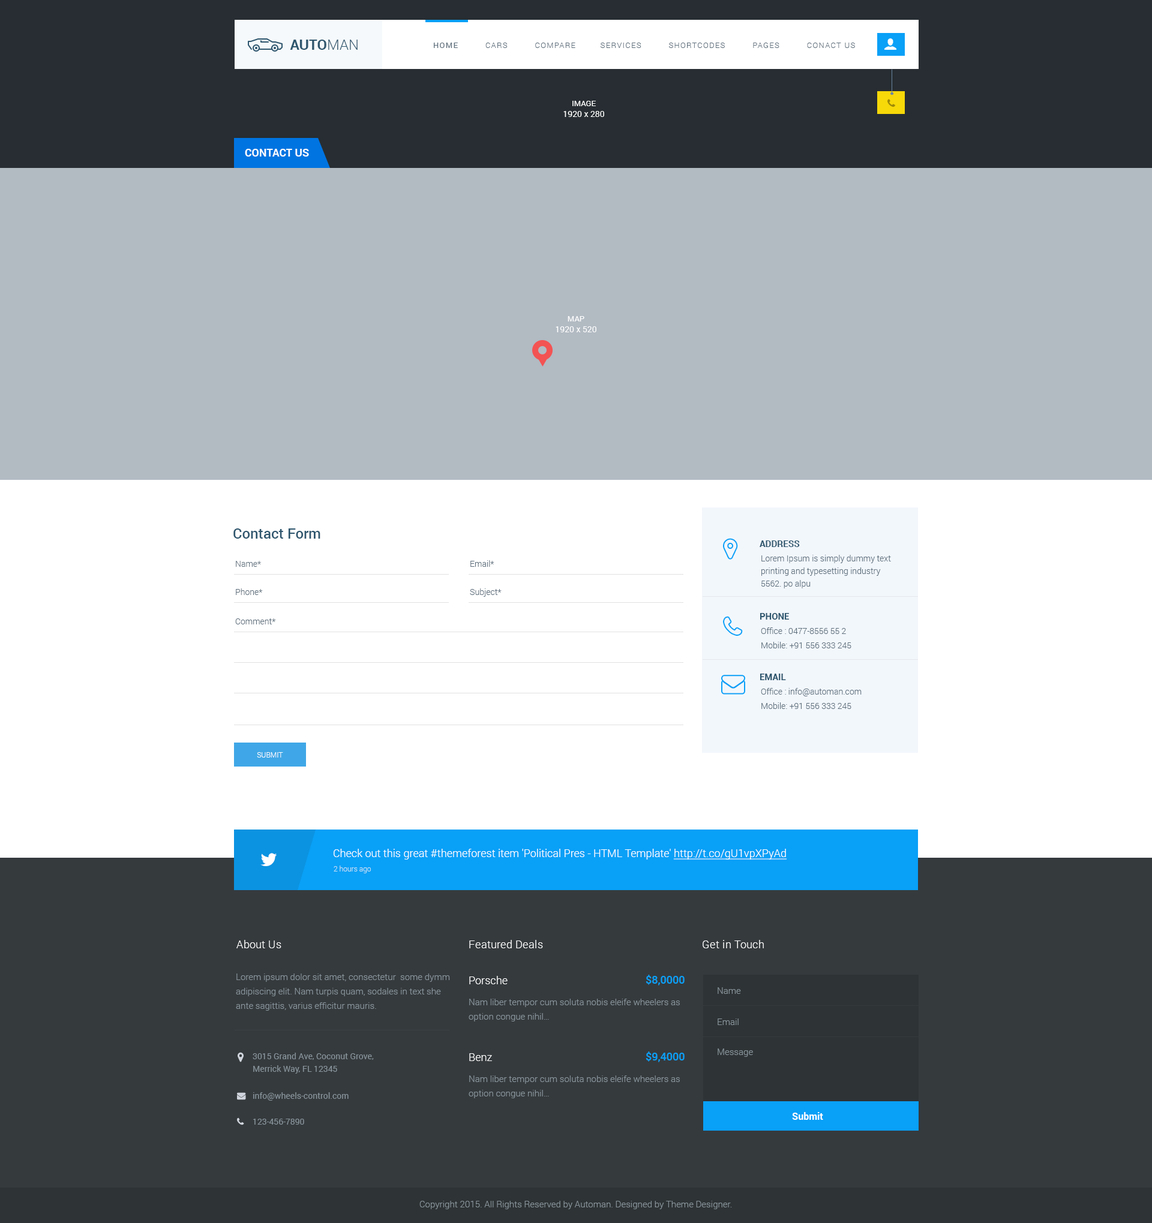
<style>
.page{position:relative;width:1152px;height:1223px;background:#ffffff}
.page>*{position:absolute;margin:0}
.t1{font:14.4px "Roboto-Bold";color:#2e566e;text-transform:uppercase}
.t2{font:14.4px "Roboto-Light";color:#2e566e;text-transform:uppercase}
.t3{font:7.8px "Roboto-Light";letter-spacing:0.1em;color:#5d6e7b;text-transform:uppercase}
.t4{font:7.8px "Roboto-Regular";letter-spacing:0.1em;color:#5d6e7b;text-transform:uppercase}
.t5{font:8.4px/10.8px "Roboto-Regular";color:#ffffff}
.t6{font:7.8px/10.8px "Roboto-Regular";color:#ffffff}
.t7{font:10.8px "Roboto-Bold";color:#ffffff;text-transform:uppercase}
.t8{font:14.4px "Roboto-Medium";color:#2e566e}
.t9{font:9px "Roboto-Bold";color:#2e566e;text-transform:uppercase}
.t10{font:8.4px/12.6px "Roboto-Light";color:#5d6e7b}
.t11{font:8.4px "Roboto-Light";color:#5d6e7b}
.t12{font:8.4px/14.4px "Roboto-Light";color:#5d6e7b}
.t13{font:7.2px "Roboto-Light";color:#ffffff;text-transform:uppercase}
.t14{font:10.8px "Roboto-Light";color:#ffffff}
.t15{font:10.8px "Roboto-Light";color:#ffffff;text-decoration:underline}
.t16{font:7.2px "Roboto-Light";color:#c3e1f4}
.t17{font:10.8px "Roboto-Light";letter-spacing:0.025em;color:#ffffff}
.t18{font:9px/14.4px "Roboto-Light";color:#88949b}
.t19{font:10.8px "Roboto-Medium";color:#09a0f7}
.t20{font:9px "Roboto-Light";color:#88949b}
.t21{font:8.4px/12.6px "Roboto-Regular";color:#88949b}
.t22{font:8.4px "Roboto-Regular";color:#88949b}
.t23{font:9.6px "Roboto-Bold";color:#ffffff}
</style>
<div class="page">
<p class="t1" style="left:290px;top:40px;width:68px;height:10px">Auto<span class="t2">man</span></p>
<p class="t3" style="left:434px;top:43px;width:421px;height:5px"><span class="t4">Home</span>          Cars          COMPARE         Services          Shortcodes          Pages          Conact us</p>
<p class="t5" style="left:563px;top:101px;width:41px;height:16px;text-align:center"><span class="t6">IMAGE<br></span>1920 x 280</p>
<p class="t7" style="left:245px;top:149px;width:64px;height:8px">Contact Us</p>
<p class="t5" style="left:556px;top:316px;width:40px;height:16px;text-align:center"><span class="t6">MAP<br></span>1920 x 520</p>
<p class="t8" style="left:233px;top:529px;width:87px;height:10px">Contact Form</p>
<p class="t9" style="left:760px;top:541px;width:40px;height:6px">Address</p>
<p class="t10" style="left:761px;top:555px;width:130px;height:34px">Lorem Ipsum is simply dummy text <br>printing and typesetting industry<br>5562. po alpu</p>
<p class="t11" style="left:236px;top:561px;width:25px;height:6px">Name*</p>
<p class="t11" style="left:470px;top:560px;width:24px;height:7px">Email*</p>
<p class="t11" style="left:236px;top:589px;width:27px;height:6px">Phone*</p>
<p class="t11" style="left:470px;top:589px;width:32px;height:8px">Subject*</p>
<p class="t9" style="left:760px;top:613px;width:29px;height:7px">Phone</p>
<p class="t11" style="left:235px;top:619px;width:41px;height:6px">Comment*</p>
<p class="t12" style="left:761px;top:628px;width:90px;height:21px">Office : 0477-8556 55 2<br>Mobile: +91 556 333 245</p>
<p class="t9" style="left:760px;top:674px;width:26px;height:6px">Email</p>
<p class="t12" style="left:761px;top:688px;width:101px;height:21px">Office : info@automan.com<br>Mobile: +91 556 333 245</p>
<p class="t13" style="left:257px;top:752px;width:26px;height:6px">SUBmit</p>
<p class="t14" style="left:334px;top:849px;width:453px;height:11px">Check out this great #themeforest item 'Political Pres - HTML Template' <span class="t15">http://t.co/gU1vpXPyAd</span></p>
<p class="t16" style="left:334px;top:866px;width:37px;height:8px">2 hours ago</p>
<p class="t17" style="left:236px;top:940px;width:45px;height:9px">About Us</p>
<p class="t17" style="left:469px;top:940px;width:74px;height:9px">Featured Deals</p>
<p class="t17" style="left:703px;top:940px;width:61px;height:9px">Get in Touch</p>
<p class="t18" style="left:236px;top:974px;width:214px;height:37px">Lorem ipsum dolor sit amet, consectetur  some dymm<br>adipiscing elit. Nam turpis quam, sodales in text she<br>ante sagittis, varius efficitur mauris.</p>
<p class="t14" style="left:469px;top:976px;width:39px;height:9px">Porsche</p>
<p class="t19" style="left:646px;top:975px;width:39px;height:11px">$8,0000</p>
<p class="t20" style="left:718px;top:988px;width:23px;height:6px">Name</p>
<p class="t18" style="left:469px;top:999px;width:211px;height:23px">Nam liber tempor cum soluta nobis eleife wheelers as<br>option congue nihil…</p>
<p class="t20" style="left:718px;top:1019px;width:21px;height:6px">Email</p>
<p class="t20" style="left:718px;top:1049px;width:35px;height:8px">Message</p>
<p class="t21" style="left:253px;top:1053px;width:121px;height:21px">3015 Grand Ave, Coconut Grove,<br>Merrick Way, FL 12345</p>
<p class="t14" style="left:469px;top:1054px;width:23px;height:7px">Benz</p>
<p class="t19" style="left:646px;top:1052px;width:39px;height:11px">$9,4000</p>
<p class="t18" style="left:469px;top:1076px;width:211px;height:23px">Nam liber tempor cum soluta nobis eleife wheelers as<br>option congue nihil…</p>
<p class="t22" style="left:253px;top:1093px;width:96px;height:8px">info@wheels-control.com</p>
<p class="t22" style="left:253px;top:1119px;width:51px;height:6px">123-456-7890</p>
<p class="t23" style="left:792px;top:1112px;width:31px;height:8px">Submit</p>
<p class="t20" style="left:419px;top:1201px;width:313px;height:9px">Copyright 2015. All Rights Reserved by Automan. Designed by Theme Designer.</p>
</div>
